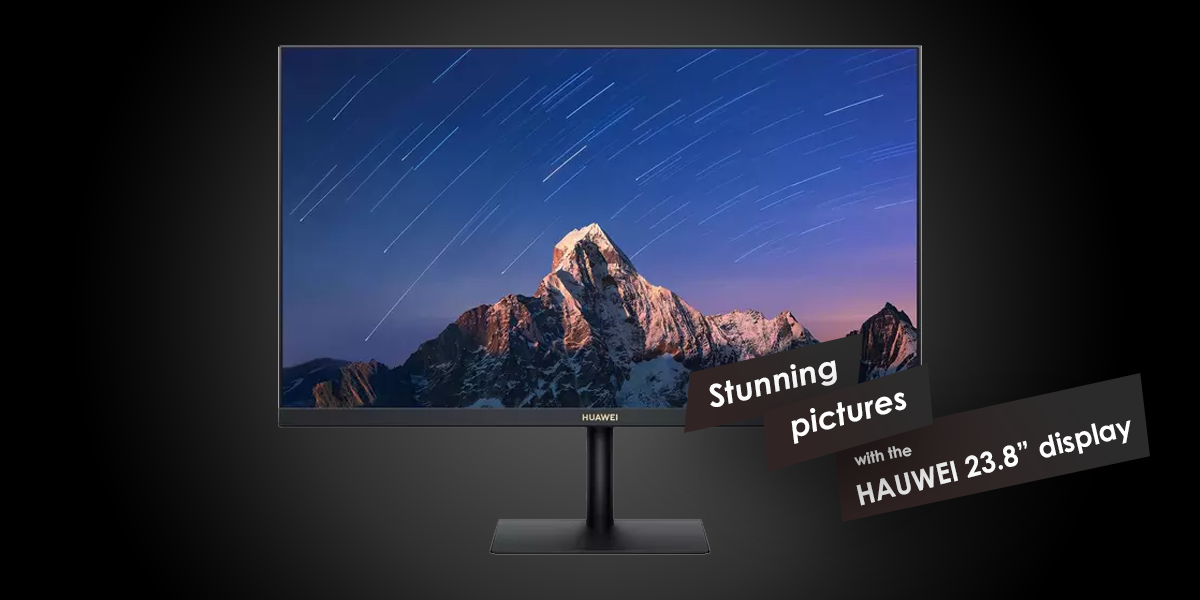
<style>
.page{position:relative;width:1200px;height:600px}
.page>*{position:absolute;margin:0}
.t1{font:31.2px "CenturyGothic-BoldItalic";color:#ffffff;scale:1.03 1}
.t2{font:31.3px "CenturyGothic-BoldItalic";color:#ffffff}
.t3{font:28.6px "CenturyGothic-Bold";color:#ffffff}
.t4{font:15.5px "CenturyGothic-Bold";color:#b8b8b8}
</style>
<div class="page">
<p class="t1" style="left:709px;top:360px;width:128px;height:47px;rotate:-14deg">Stunning</p>
<p class="t2" style="left:791px;top:392px;width:116px;height:52px;rotate:-14deg">pictures</p>
<p class="t3" style="left:856px;top:420px;width:275px;height:86px;rotate:-15deg">HAUWEI 23.8” display</p>
<p class="t4" style="left:854px;top:446px;width:58px;height:20px;rotate:-12deg">with the</p>
</div>
